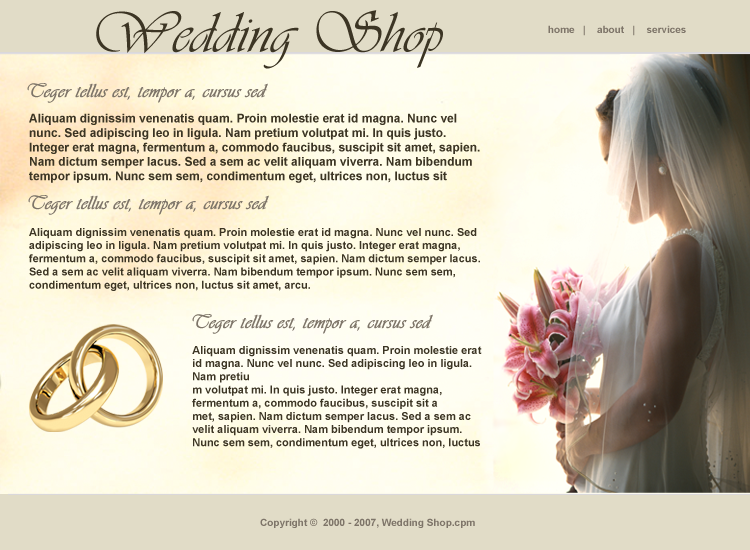
<style>
.page{position:relative;width:750px;height:550px}
.page>*{position:absolute;margin:0}
.t1{font:60px "Vivaldii";color:#3c3524}
.t2{font:10px "Arial-BoldMT";color:#7e7569}
.t3{font:20px "Vivaldii";color:#7e7569;font-weight:bold}
.t4{font:12px "Arial-BoldMT";color:#3c3524}
.t5{font:11px "Arial-BoldMT";color:#3c3524}
</style>
<div class="page">
<p class="t1" style="left:96px;top:10px;width:347px;height:59px">Wedding Shop</p>
<p class="t2" style="left:548px;top:25px;width:138px;height:11px">home   |    about   |    services</p>
<p class="t3" style="left:27px;top:83px;width:241px;height:20px">Teger tellus est, tempor a, cursus sed</p>
<p class="t4" style="left:29px;top:113px;width:451px;height:70px">Aliquam dignissim venenatis quam. Proin molestie erat id magna. Nunc vel nunc. Sed adipiscing leo in ligula. Nam pretium volutpat mi. In quis justo. Integer erat magna, fermentum a, commodo faucibus, suscipit sit amet, sapien. Nam dictum semper lacus. Sed a sem ac velit aliquam viverra. Nam bibendum tempor ipsum. Nunc sem sem, condimentum eget, ultrices non, luctus sit amet, arcu.</p>
<p class="t3" style="left:28px;top:195px;width:241px;height:20px">Teger tellus est, tempor a, cursus sed</p>
<p class="t5" style="left:29px;top:228px;width:451px;height:63px">Aliquam dignissim venenatis quam. Proin molestie erat id magna. Nunc vel nunc. Sed adipiscing leo in ligula. Nam pretium volutpat mi. In quis justo. Integer erat magna, fermentum a, commodo faucibus, suscipit sit amet, sapien. Nam dictum semper lacus. Sed a sem ac velit aliquam viverra. Nam bibendum tempor ipsum. Nunc sem sem, condimentum eget, ultrices non, luctus sit amet, arcu.</p>
<p class="t3" style="left:192px;top:314px;width:241px;height:20px">Teger tellus est, tempor a, cursus sed</p>
<p class="t5" style="left:192px;top:346px;width:290px;height:103px">Aliquam dignissim venenatis quam. Proin molestie erat id magna. Nunc vel nunc. Sed adipiscing leo in ligula. Nam pretiu<br>m volutpat mi. In quis justo. Integer erat magna, fermentum a, commodo faucibus, suscipit sit a<br>met, sapien. Nam dictum semper lacus. Sed a sem ac velit aliquam viverra. Nam bibendum tempor ipsum. Nunc sem sem, condimentum eget, ultrices non, luctus sit amet, arcu.</p>
</div>
